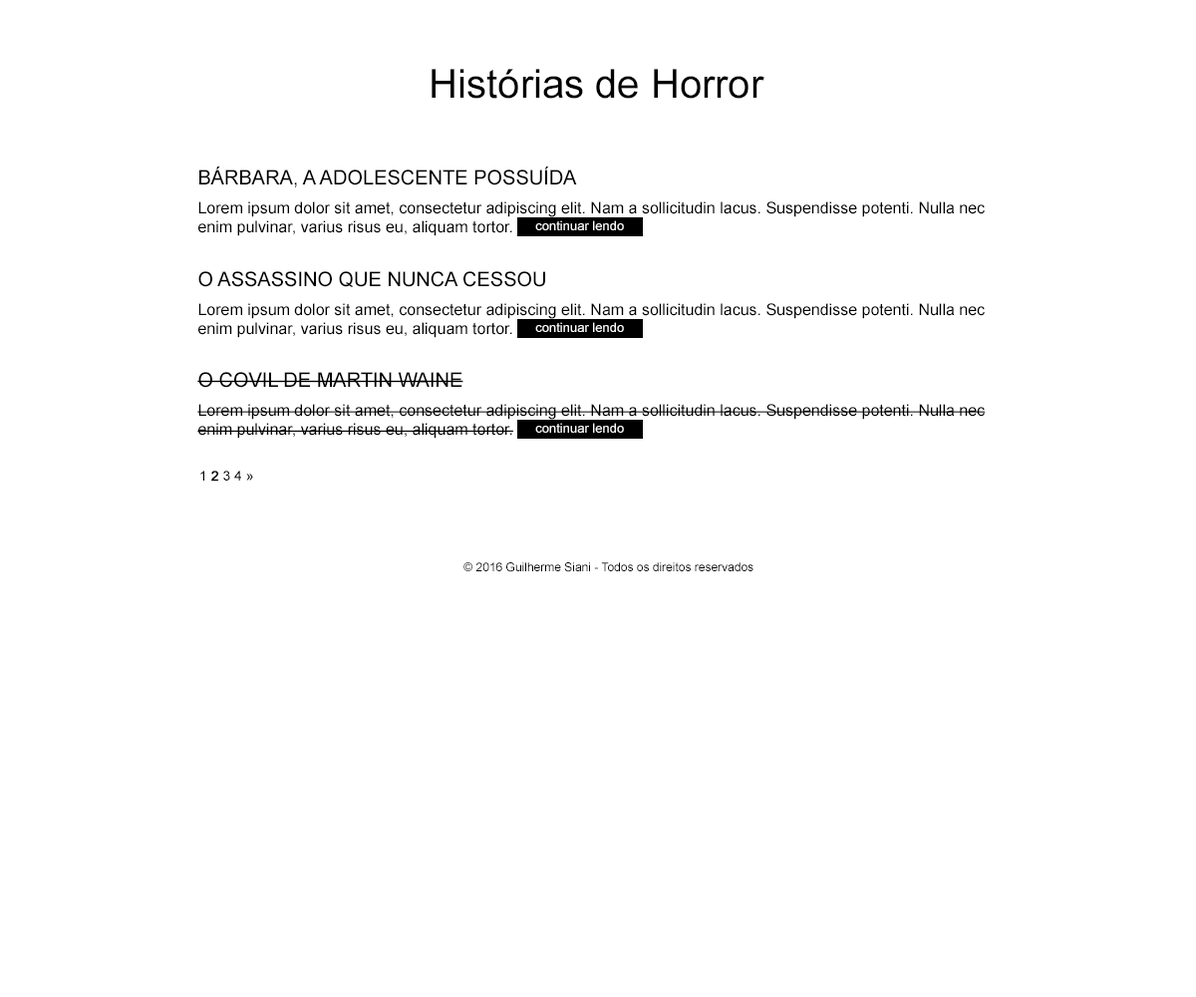
<style>
.page{position:relative;width:1196px;height:997px;background:#ffffff}
.page>*{position:absolute;margin:0}
.t1{font:39.9px "ArialMT";color:#000000}
.t2{font:19.9px "ArialMT";color:#000000;text-transform:uppercase}
.t3{font:15.9px "ArialMT";color:#000000}
.t4{font:13px "ArialMT";color:#ffffff}
.t5{font:14px "ArialMT";color:#000000}
.t6{font:14px "ArialMT";color:#000000;font-weight:bold}
.t7{font:12px "ArialMT";color:#000000}
</style>
<div class="page">
<p class="t1" style="left:432px;top:69px;width:333px;height:30px">Histórias de Horror</p>
<p class="t2" style="left:199px;top:166px;width:378px;height:21px">Bárbara, a adolescente possuída</p>
<p class="t3" style="left:198px;top:201px;width:787px;height:35px">Lorem ipsum dolor sit amet, consectetur adipiscing elit. Nam a sollicitudin lacus. Suspendisse potenti. Nulla nec enim pulvinar, varius risus eu, aliquam tortor.</p>
<p class="t4" style="left:535px;top:220px;width:89px;height:10px">continuar lendo</p>
<p class="t2" style="left:198px;top:271px;width:347px;height:16px">O assassino que nunca cessou</p>
<p class="t3" style="left:198px;top:303px;width:787px;height:35px">Lorem ipsum dolor sit amet, consectetur adipiscing elit. Nam a sollicitudin lacus. Suspendisse potenti. Nulla nec enim pulvinar, varius risus eu, aliquam tortor.</p>
<p class="t4" style="left:535px;top:322px;width:89px;height:10px">continuar lendo</p>
<p class="t2" style="left:197px;top:372px;width:267px;height:16px">O covil de Martin Waine</p>
<p class="t3" style="left:197px;top:404px;width:789px;height:35px">Lorem ipsum dolor sit amet, consectetur adipiscing elit. Nam a sollicitudin lacus. Suspendisse potenti. Nulla nec enim pulvinar, varius risus eu, aliquam tortor.</p>
<p class="t4" style="left:535px;top:423px;width:89px;height:10px">continuar lendo</p>
<p class="t5" style="left:200px;top:471px;width:53px;height:10px">1 <span class="t6">2</span> 3 4 »</p>
<p class="t7" style="left:464px;top:562px;width:290px;height:10px">© 2016 Guilherme Siani - Todos os direitos reservados</p>
</div>
